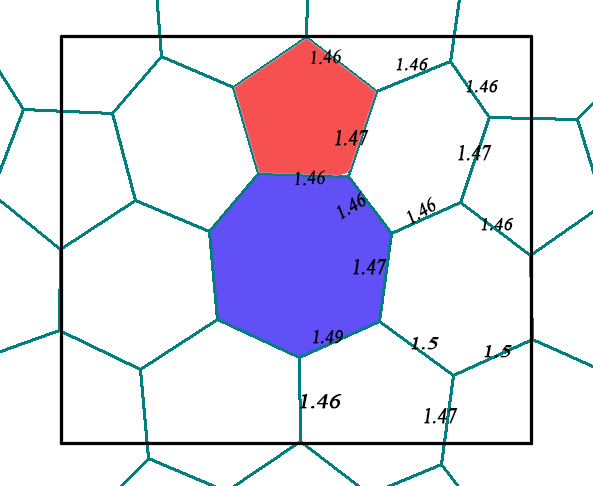
<style>
.page{position:relative;width:593px;height:486px;background:#ffffff}
.page>*{position:absolute;margin:0}
.t1{font:19.1px "TimesNewRomanPSMT";color:#000000;font-weight:bold;font-style:italic;scale:0.91 1}
.t2{font:18.4px "TimesNewRomanPSMT";color:#000000;font-weight:bold;font-style:italic;scale:0.95 1}
.t3{font:22.8px "TimesNewRomanPSMT";color:#000000;font-weight:bold;font-style:italic;scale:0.8 1}
.t4{font:19.9px "TimesNewRomanPSMT";color:#000000;font-weight:bold;font-style:italic;scale:0.84 1}
.t5{font:18.5px "TimesNewRomanPSMT";color:#000000;font-weight:bold;font-style:italic;scale:1.19 1}
.t6{font:21.3px "TimesNewRomanPSMT";color:#000000;font-weight:bold;font-style:italic;scale:1.07 1}
</style>
<div class="page">
<p class="t1" style="left:311px;top:49px;width:31px;height:16px;rotate:-4deg">1.46</p>
<p class="t2" style="left:396px;top:58px;width:33px;height:13px">1.46</p>
<p class="t2" style="left:466px;top:80px;width:33px;height:13px">1.46</p>
<p class="t3" style="left:335px;top:130px;width:34px;height:16px">1.47</p>
<p class="t3" style="left:458px;top:145px;width:34px;height:16px">1.47</p>
<p class="t1" style="left:295px;top:170px;width:31px;height:16px;rotate:-4deg">1.46</p>
<p class="t1" style="left:336px;top:191px;width:30px;height:29px;rotate:-31deg">1.46</p>
<p class="t1" style="left:406px;top:196px;width:30px;height:29px;rotate:-31deg">1.46</p>
<p class="t2" style="left:481px;top:218px;width:33px;height:13px">1.46</p>
<p class="t3" style="left:353px;top:259px;width:34px;height:16px">1.47</p>
<p class="t4" style="left:313px;top:330px;width:30px;height:14px">1.49</p>
<p class="t5" style="left:411px;top:337px;width:28px;height:13px">1.5</p>
<p class="t5" style="left:484px;top:345px;width:28px;height:13px">1.5</p>
<p class="t6" style="left:300px;top:394px;width:42px;height:15px">1.46</p>
<p class="t3" style="left:424px;top:408px;width:34px;height:16px">1.47</p>
</div>
